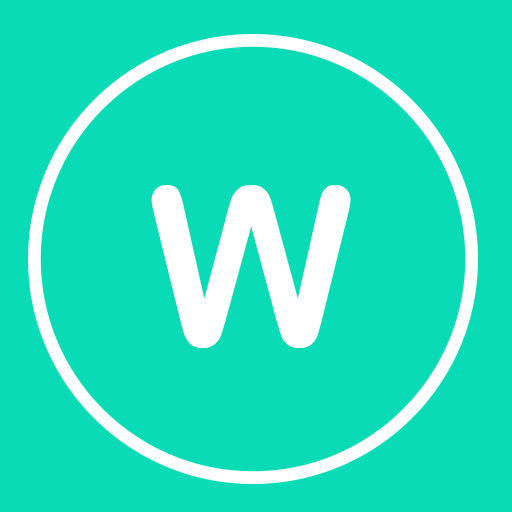
<style>
.page{position:relative;width:512px;height:512px;background:#09dbb6}
.page>*{position:absolute;margin:0}
.t1{font:220px "ArialRoundedMTBold";letter-spacing:0.1em;color:#ffffff;font-variant:small-caps}
</style>
<div class="page">
<p class="t1" style="left:151px;top:185px;width:200px;height:163px">W</p>
</div>
